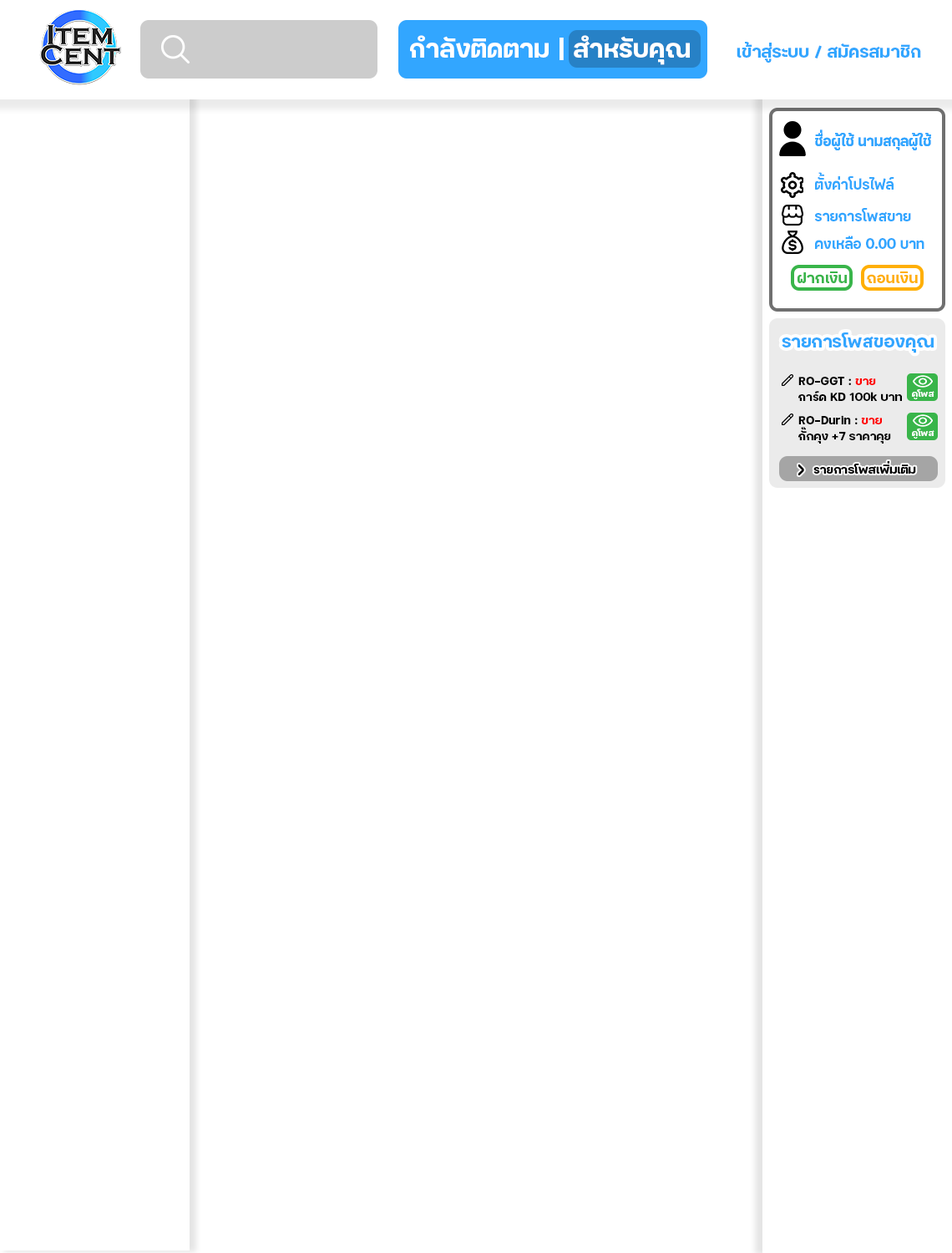
<style>
.page{position:relative;width:952px;height:1253px;background:#ffffff}
.page>*{position:absolute;margin:0}
.t1{font:25.1px "FCSoundNoncommercial-Bold";color:#ffffff}
.t2{font:16.9px "FCSoundNoncommercial-Bold";color:#32a6ff}
.t3{font:14.9px "FCSoundNoncommercial-Bold";color:#32a6ff;scale:0.91 1}
.t4{font:14.7px "FCSoundNoncommercial-Bold";color:#39b54a}
.t5{font:14.7px "FCSoundNoncommercial-Bold";color:#ffaf04}
.t6{font:17.2px "FCSoundNoncommercial-Bold";color:#32a6ff}
.t7{font:11.7px/15.9px "FCSoundNoncommercial-Bold";color:#000000}
.t8{font:11.7px/15.9px "FCSoundNoncommercial-Bold";color:#ff0000}
.t9{font:8.7px "FCSoundNoncommercial-Bold";color:#ffffff}
.t10{font:11.7px "FCSoundNoncommercial-Bold";color:#000000}
</style>
<div class="page">
<p class="t1" style="left:410px;top:35px;width:280px;height:30px">กำลังติดตาม | สำหรับคุณ</p>
<p class="t2" style="left:737px;top:42px;width:184px;height:21px">เข้าสู่ระบบ / สมัครสมาชิก</p>
<p class="t3" style="left:815px;top:129px;width:116px;height:21px">ชื่อผู้ใช้ นามสกุลผู้ใช้</p>
<p class="t3" style="left:815px;top:129px;width:116px;height:21px">ชื่อผู้ใช้ นามสกุลผู้ใช้</p>
<p class="t3" style="left:815px;top:172px;width:79px;height:18px">ตั้งค่าโปรไฟล์</p>
<p class="t3" style="left:814px;top:208px;width:97px;height:13px">รายการโพสขาย</p>
<p class="t3" style="left:815px;top:235px;width:109px;height:14px">คงเหลือ 0.00 บาท</p>
<p class="t4" style="left:797px;top:271px;width:50px;height:12px">ฝากเงิน</p>
<p class="t5" style="left:867px;top:271px;width:51px;height:12px">ถอนเงิน</p>
<p class="t6" style="left:782px;top:332px;width:152px;height:21px">รายการโพสของคุณ</p>
<p class="t7" style="left:798px;top:377px;width:104px;height:24px">RO-GGT : <span class="t8">ขาย<br></span>การ์ด KD 100k บาท</p>
<p class="t9" style="left:912px;top:389px;width:22px;height:10px">ดูโพส</p>
<p class="t7" style="left:798px;top:415px;width:93px;height:28px">RO-Durin : <span class="t8">ขาย<br></span>กั๊กคุง +7 ราคาคุย</p>
<p class="t9" style="left:912px;top:428px;width:22px;height:10px">ดูโพส</p>
<p class="t10" style="left:813px;top:461px;width:103px;height:12px">รายการโพสเพิ่มเติม</p>
</div>
